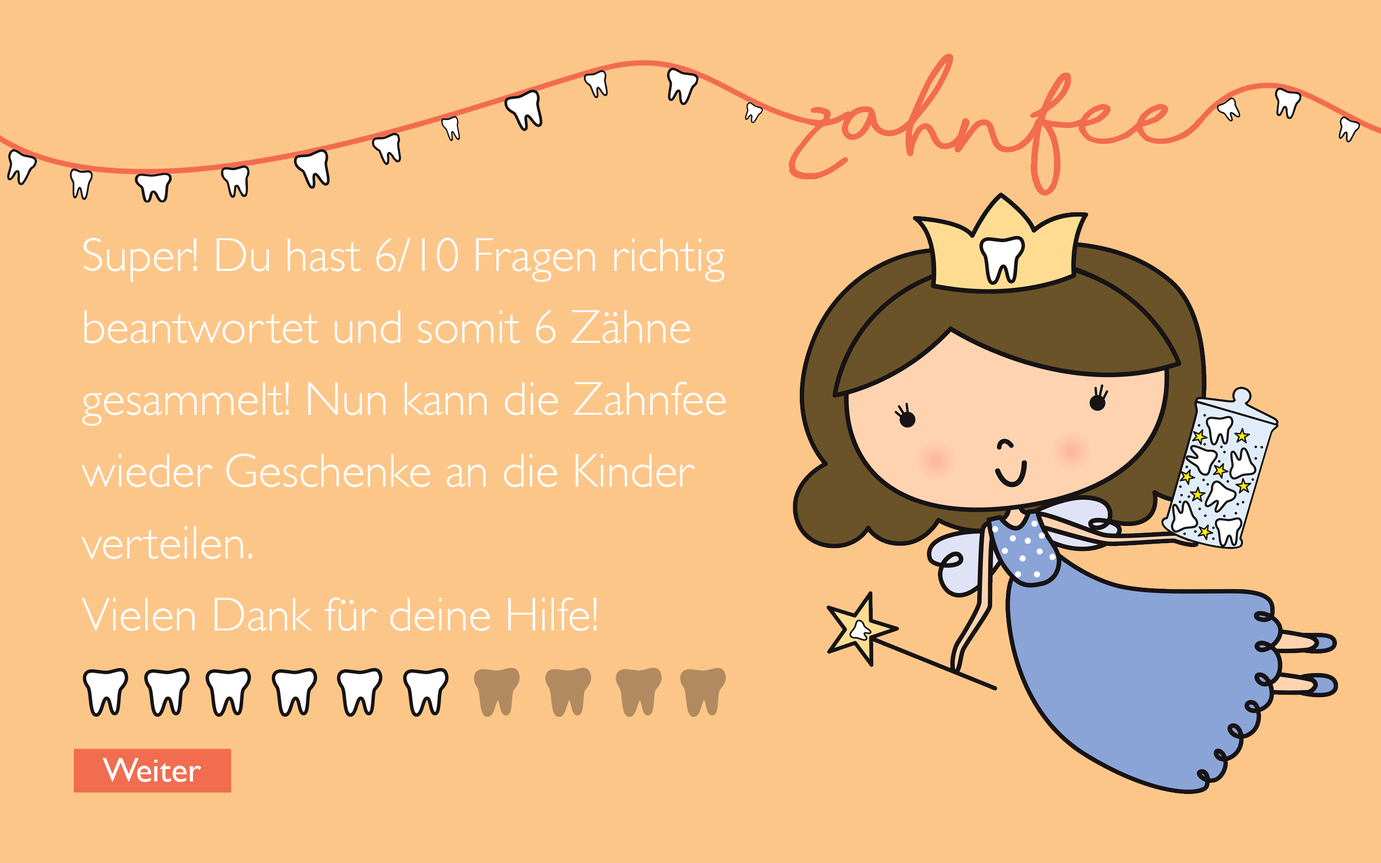
<style>
.page{position:relative;width:1381px;height:863px;background:#fdc689}
.page>*{position:absolute;margin:0}
.t1{font:95.9px "ShorelinesScriptBold";color:#f26c4f}
.t2{font:48px/71.9px "GillSans-Light";color:#ffffff}
.t3{font:34.5px "GillSans";color:#ffffff}
</style>
<div class="page">
<p class="t1" style="left:788px;top:54px;width:415px;height:142px">zahnfee</p>
<p class="t2" style="left:82px;top:238px;width:644px;height:393px">Super! Du hast 6/10 Fragen richtig beantwortet und somit 6 Zähne gesammelt! Nun kann die Zahnfee wieder Geschenke an die Kinder verteilen.<br>Vielen Dank für deine Hilfe!</p>
<p class="t3" style="left:103px;top:758px;width:98px;height:24px">Weiter</p>
</div>
